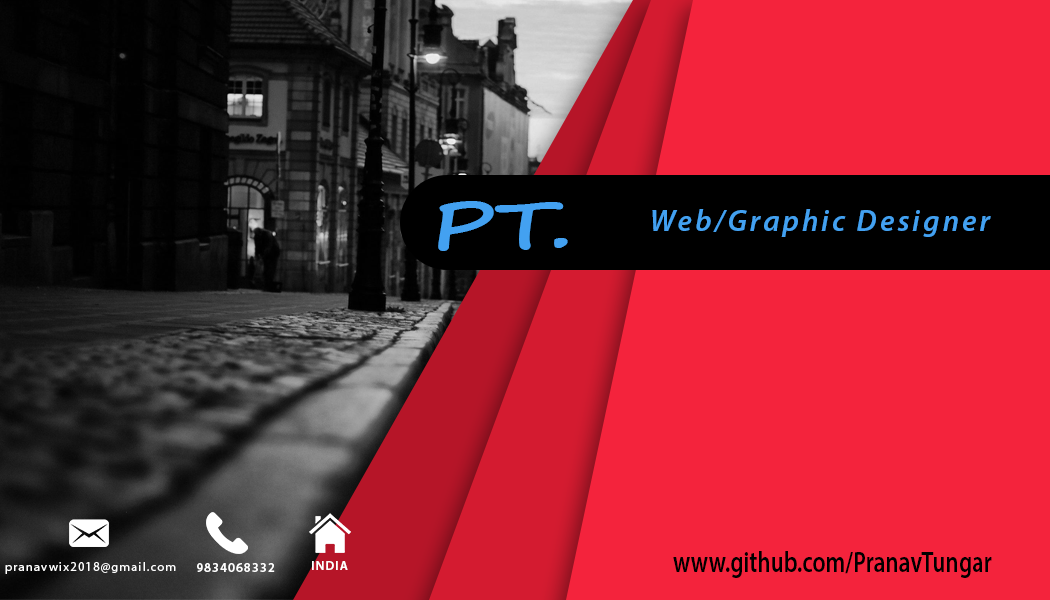
<style>
.page{position:relative;width:1050px;height:600px;background:#f4233c}
.page>*{position:absolute;margin:0}
.t1{font:66.6px "SegoePrint-Bold";color:#43a1f1;scale:1.35 1}
.t2{font:30.4px "MyriadPro-SemiboldIt";letter-spacing:0.1em;color:#43a1f1}
.t3{font:29.4px "MyriadPro-Semibold";color:#000000;scale:0.79 1}
.t4{font:12.5px "MyriadPro-Regular";letter-spacing:0.1em;color:#ffffff}
.t5{font:12.5px "MyriadPro-Semibold";letter-spacing:0.1em;color:#ffffff}
</style>
<div class="page">
<p class="t1" style="left:438px;top:201px;width:130px;height:50px">PT.</p>
<p class="t2" style="left:652px;top:209px;width:339px;height:28px">Web/Graphic Designer</p>
<p class="t3" style="left:673px;top:551px;width:319px;height:27px">www.github.com/PranavTungar</p>
<p class="t4" style="left:5px;top:562px;width:171px;height:12px">pranavwix2018@gmail.com</p>
<p class="t5" style="left:197px;top:563px;width:78px;height:9px">9834068332</p>
<p class="t5" style="left:312px;top:561px;width:36px;height:9px">INDIA</p>
</div>
